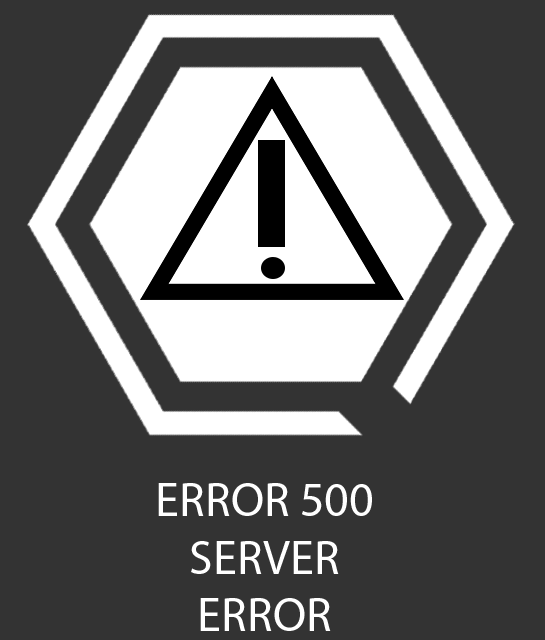
<style>
.page{position:relative;width:545px;height:640px;background:#333333}
.page>*{position:absolute;margin:0}
.t1{font:48px "MyriadPro-Regular";color:#ffffff}
</style>
<div class="page">
<p class="t1" style="left:158px;top:483px;width:214px;height:148px;text-align:center">ERROR 500<br>SERVER<br>ERROR</p>
</div>
